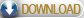
<style>
.page{position:relative;width:84px;height:18px}
.page>*{position:absolute;margin:0}
.t1{font:14px "ArialRoundedMTBold";letter-spacing:-0.12em;color:#ab8725;scale:0.82 1}
</style>
<div class="page">
<p class="t1" style="left:22px;top:4px;width:59px;height:10px">DOWNLOAD</p>
</div>
